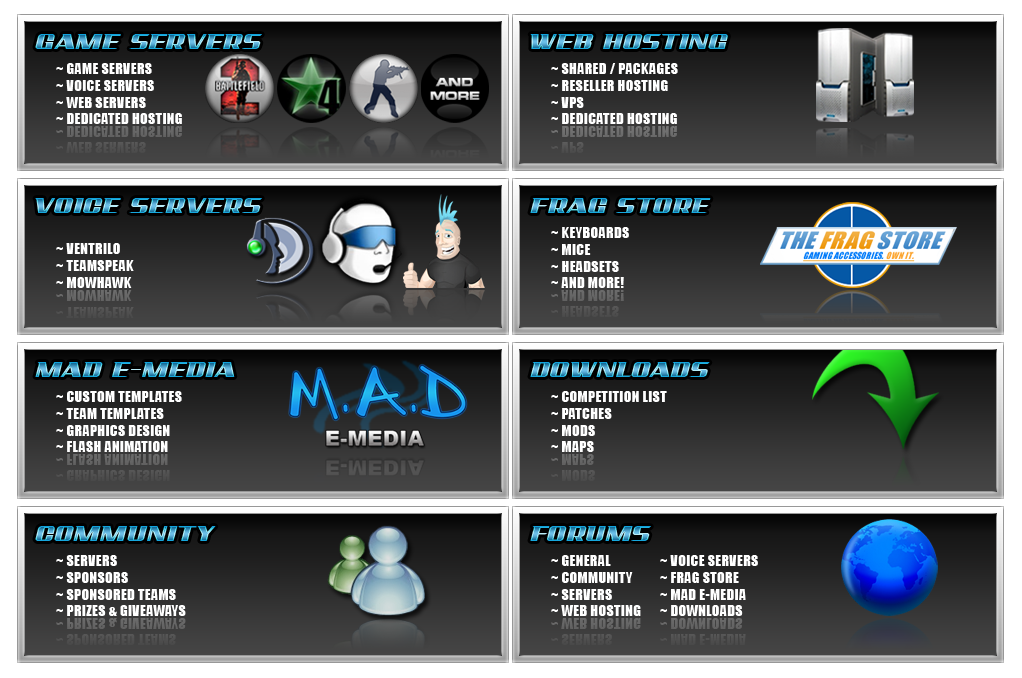
<style>
.page{position:relative;width:1022px;height:678px}
.page>*{position:absolute;margin:0}
.t1{font:30px "AddCityboyNormal"}
.t2{font:14px "Impact";letter-spacing:0.025em;color:#ffffff}
</style>
<div class="page">
<p class="t1" style="left:35px;top:34px;width:227px;height:15px">GAME SERVERS</p>
<p class="t1" style="left:530px;top:34px;width:198px;height:15px">WEB HOSTING</p>
<p class="t2" style="left:56px;top:63px;width:126px;height:61px">~ GAME SERVERS<br>~ VOICE SERVERS<br>~ WEB SERVERS<br>~ DEDICATED HOSTING</p>
<p class="t2" style="left:551px;top:63px;width:127px;height:61px">~ SHARED / PACKAGES<br>~ RESELLER HOSTING<br>~ VPS<br>~ DEDICATED HOSTING</p>
<p class="t1" style="left:35px;top:198px;width:227px;height:15px">VOICE SERVERS</p>
<p class="t1" style="left:530px;top:198px;width:181px;height:15px">FRAG STORE</p>
<p class="t2" style="left:551px;top:227px;width:78px;height:61px">~ KEYBOARDS<br>~ MICE<br>~ HEADSETS<br>~ AND MORE!</p>
<p class="t2" style="left:56px;top:243px;width:78px;height:45px">~ VENTRILO<br>~ TEAMSPEAK<br>~ MOWHAWK</p>
<p class="t1" style="left:35px;top:362px;width:200px;height:15px">MAD E-MEDIA</p>
<p class="t1" style="left:530px;top:362px;width:180px;height:15px">DOWNLOADS</p>
<p class="t2" style="left:56px;top:391px;width:126px;height:61px">~ CUSTOM TEMPLATES<br>~ TEAM TEMPLATES<br>~ GRAPHICS DESIGN<br>~ FLASH ANIMATION</p>
<p class="t2" style="left:551px;top:391px;width:116px;height:61px">~ COMPETITION LIST<br>~ PATCHES<br>~ MODS<br>~ MAPS</p>
<p class="t1" style="left:35px;top:526px;width:181px;height:15px">COMMUNITY</p>
<p class="t1" style="left:530px;top:526px;width:121px;height:15px">FORUMS</p>
<p class="t2" style="left:56px;top:555px;width:130px;height:61px">~ SERVERS<br>~ SPONSORS<br>~ SPONSORED TEAMS<br>~ PRIZES &amp; GIVEAWAYS</p>
<p class="t2" style="left:551px;top:555px;width:90px;height:61px">~ GENERAL<br>~ COMMUNITY<br>~ SERVERS<br>~ WEB HOSTING</p>
<p class="t2" style="left:660px;top:555px;width:98px;height:61px">~ VOICE SERVERS<br>~ FRAG STORE<br>~ MAD E-MEDIA<br>~ DOWNLOADS</p>
</div>
